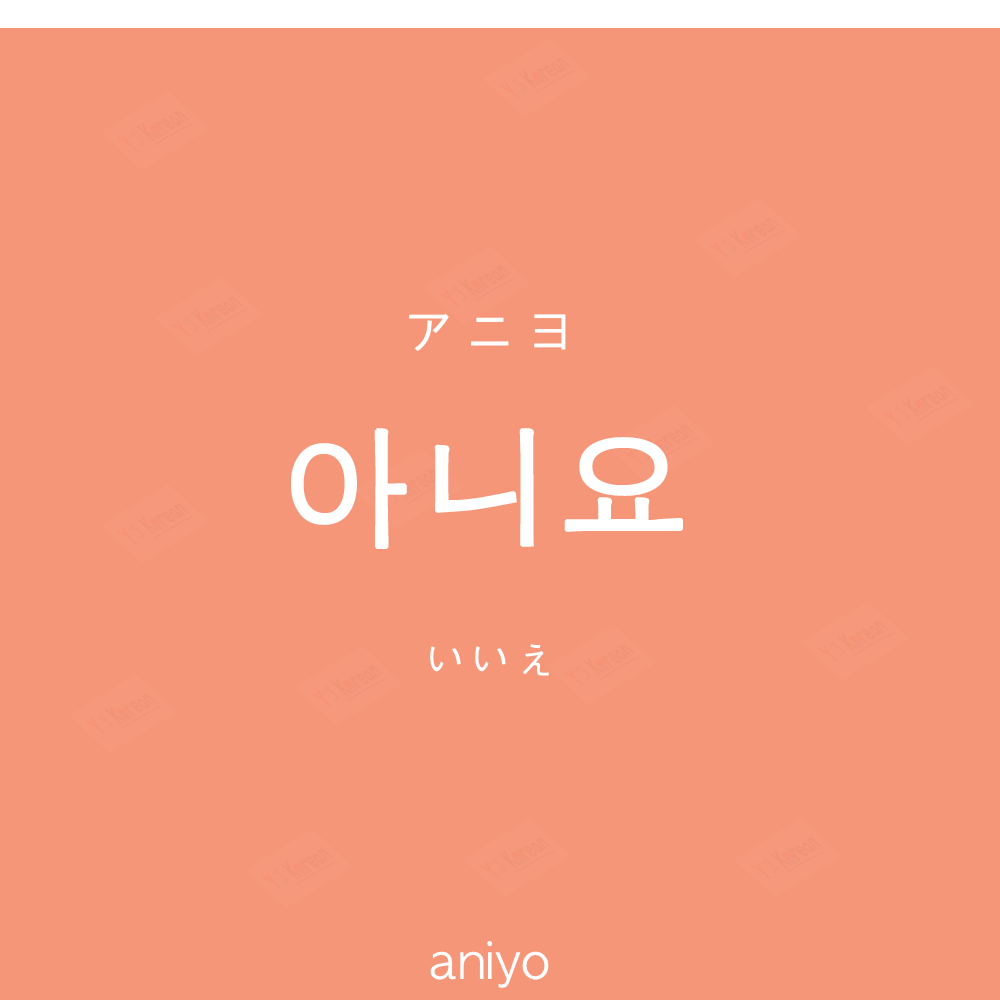
<style>
.page{position:relative;width:1000px;height:1000px;background:#f69679}
.page>*{position:absolute;margin:0}
.t1{font:60px "AppleGothic";color:#ffffff}
.t2{font:130px "AppleGothic";letter-spacing:0.04em;color:#ffffff;font-weight:bold}
.t3{font:45px "AppleGothic";color:#ffffff}
.t4{font:50px "AppleGothic";color:#ffffff}
</style>
<div class="page">
<p class="t1" style="left:409px;top:313px;width:157px;height:38px">アニヨ</p>
<p class="t2" style="left:291px;top:428px;width:392px;height:121px">아니요</p>
<p class="t3" style="left:430px;top:644px;width:119px;height:32px">いいえ</p>
<p class="t4" style="left:430px;top:941px;width:119px;height:47px">aniyo</p>
</div>
